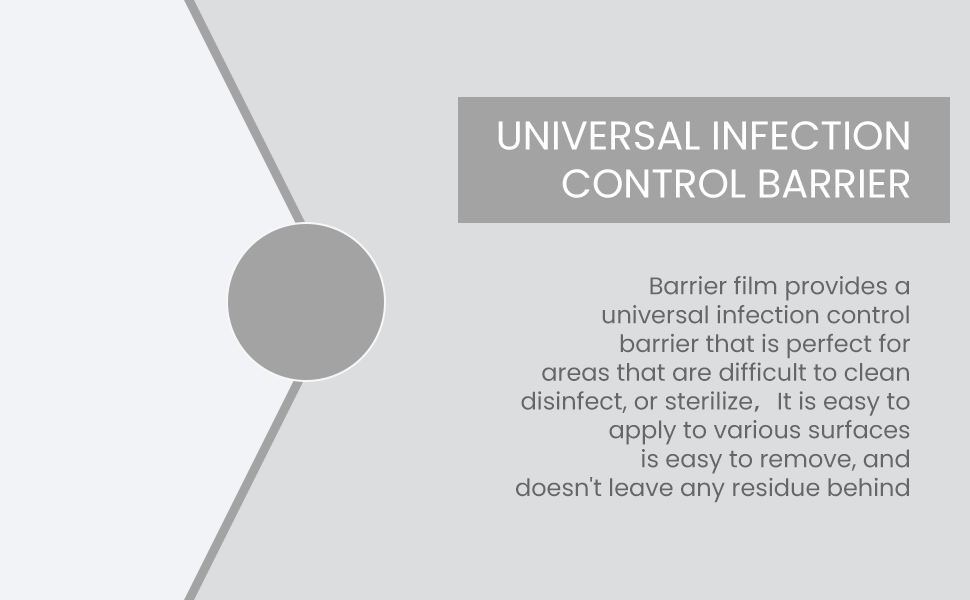
<style>
.page{position:relative;width:970px;height:600px;background:#dcdddf}
.page>*{position:absolute;margin:0}
.t1{font:40px "Poppins-Regular";color:#ffffff;text-transform:uppercase}
.t2{font:24px "Poppins-Regular";color:#666666}
.t3{font:24px "AdobeHeitiStd-Regular";color:#666666}
</style>
<div class="page">
<p class="t1" style="left:498px;top:121px;width:412px;height:77px;text-align:right">UNIVERSAL INFECTION<br>CONTROL BARRIER</p>
<p class="t2" style="left:516px;top:276px;width:394px;height:227px;text-align:right">Barrier film provides a<br>universal infection control<br>barrier that is perfect for<br>areas that are difficult to clean<br>disinfect, or sterilize<span class="t3">，</span>It is easy to<br>apply to various surfaces<br>is easy to remove, and<br>doesn't leave any residue behind</p>
</div>
